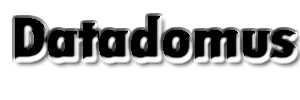
<style>
.page{position:relative;width:300px;height:100px;background:#ffffff}
.page>*{position:absolute;margin:0}
.t1{font:63px "TwCenMT-CondensedExtraBold";letter-spacing:-0.04em;color:#000000;font-weight:bold;scale:1.1 1}
</style>
<div class="page">
<p class="t1" style="left:15px;top:16px;width:281px;height:45px">Datadomus</p>
</div>
